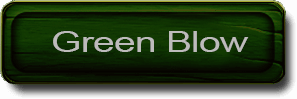
<style>
.page{position:relative;width:297px;height:99px}
.page>*{position:absolute;margin:0}
.t1{font:28.6px "ArialMT";letter-spacing:-0.02em;color:#bdbbbb;scale:1.36 1}
</style>
<div class="page">
<p class="t1" style="left:53px;top:31px;width:196px;height:21px">Green Blow</p>
</div>
